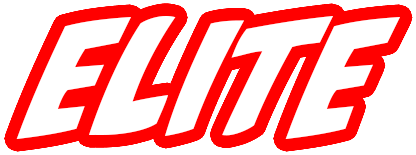
<style>
.page{position:relative;width:416px;height:155px;background:#ffffff}
.page>*{position:absolute;margin:0}
.t1{font:144.9px "CCBiffBamBoom";color:#ffffff}
</style>
<div class="page">
<p class="t1" style="left:16px;top:16px;width:384px;height:123px">ELITE</p>
</div>
